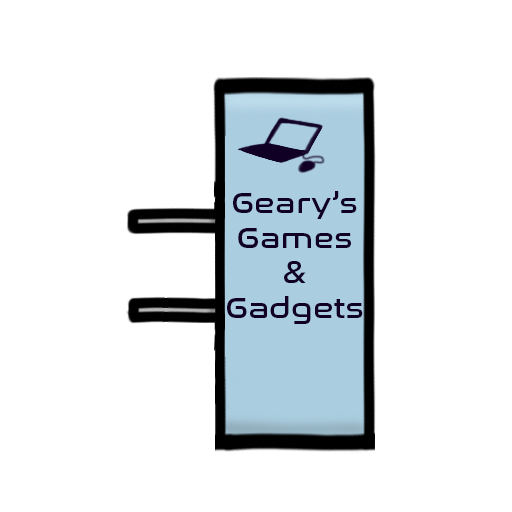
<style>
.page{position:relative;width:512px;height:512px;background:#ffffff}
.page>*{position:absolute;margin:0}
.t1{font:29.2px "NasalizationRg-Regular";color:#100026;scale:1.09 1}
</style>
<div class="page">
<p class="t1" style="left:227px;top:191px;width:136px;height:133px;text-align:center">Geary’s<br>Games<br>&amp;<br>Gadgets</p>
</div>
